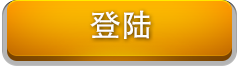
<style>
.page{position:relative;width:239px;height:70px}
.page>*{position:absolute;margin:0}
.t1{font:32px "AdobeHeitiStd-Regular";color:#fefefe}
</style>
<div class="page">
<p class="t1" style="left:90px;top:10px;width:61px;height:29px">登陆</p>
</div>
